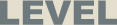
<style>
.page{position:relative;width:117px;height:25px;background:#6d797d}
.page>*{position:absolute;margin:0}
.t1{font:34px "Arial-Black";color:#6d797d;text-transform:uppercase}
</style>
<div class="page">
<p class="t1" style="left:0px;top:0px;width:118px;height:25px">LEVEL</p>
</div>
